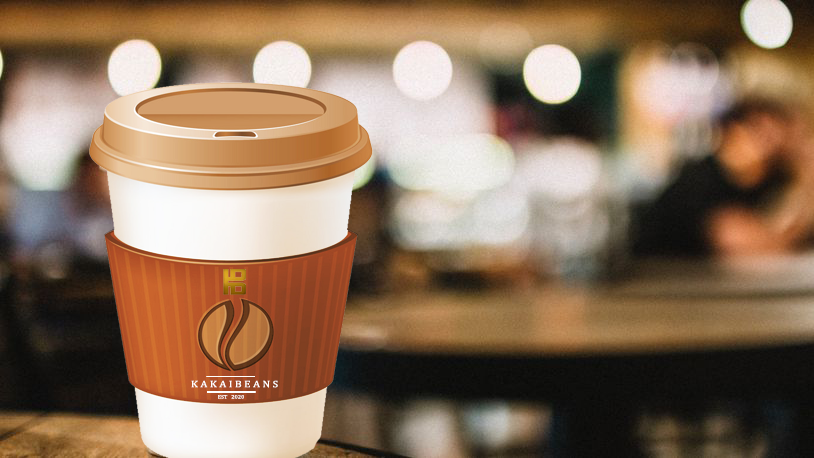
<style>
.page{position:relative;width:814px;height:458px}
.page>*{position:absolute;margin:0}
.t1{font:9.5px "Cambria";color:#ffffff;scale:1.18 1}
.t2{font:5px "Cambria";scale:1.18 1}
</style>
<div class="page">
<p class="t1" style="left:191px;top:380px;width:87px;height:8px">K A K A I B E A N S</p>
<p class="t2" style="left:218px;top:395px;width:26px;height:4px">EST   2020</p>
</div>
